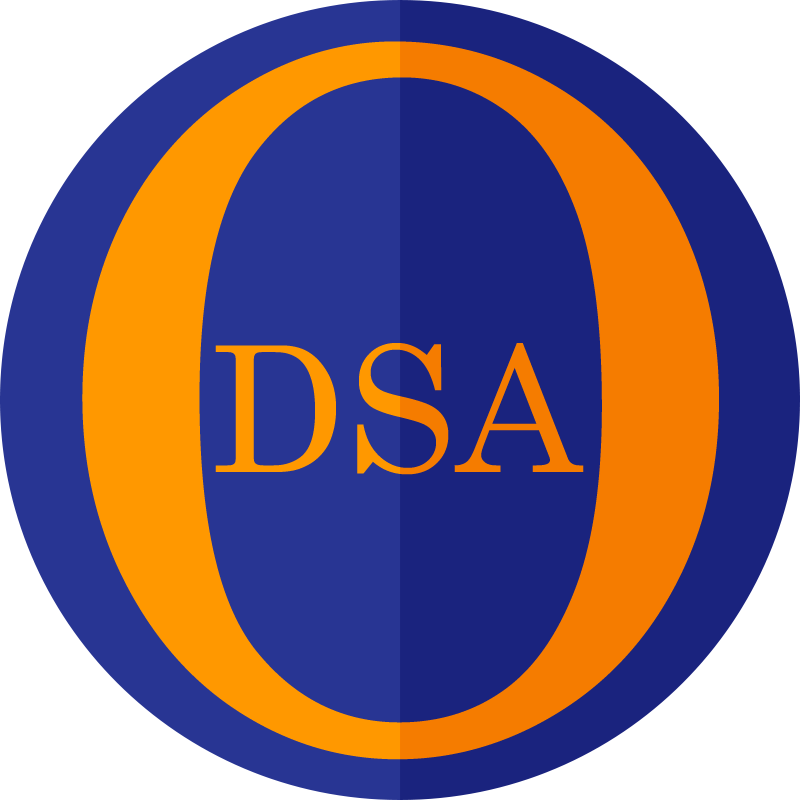
<style>
.page{position:relative;width:800px;height:800px;background:#283593}
.page>*{position:absolute;margin:0}
.t1{font:950px "CenturySchoolbook"}
.t2{font:175px "CenturySchoolbook"}
</style>
<div class="page">
<p class="t1" style="left:82px;top:41px;width:637px;height:719px">O</p>
<p class="t2" style="left:215px;top:343px;width:369px;height:132px">DSA</p>
</div>
